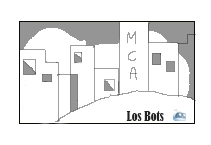
<style>
.page{position:relative;width:211px;height:145px;background:#ffffff}
.page>*{position:absolute;margin:0}
.t1{font:12px "BernardMT-Condensed";color:#222222}
</style>
<div class="page">
<p class="t1" style="left:126px;top:111px;width:38px;height:10px">Los Bots</p>
</div>
